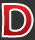
<style>
.page{position:relative;width:35px;height:40px;background:#333333}
.page>*{position:absolute;margin:0}
.t1{font:50px "BerlinSansFBDemi-Bold";letter-spacing:0.2em}
</style>
<div class="page">
<p class="t1" style="left:1px;top:3px;width:33px;height:35px">D</p>
</div>
